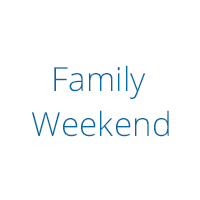
<style>
.page{position:relative;width:200px;height:200px;background:#ffffff}
.page>*{position:absolute;margin:0}
.t1{font:33.3px "OpenSans-Light";color:#006ba4}
</style>
<div class="page">
<p class="t1" style="left:54px;top:65px;width:92px;height:34px">Family</p>
<p class="t1" style="left:31px;top:110px;width:138px;height:27px">Weekend</p>
</div>
